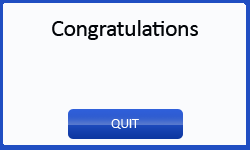
<style>
.page{position:relative;width:250px;height:150px;background:#fafbfd}
.page>*{position:absolute;margin:0}
.t1{font:24px "Calibri";letter-spacing:-0.02em;color:#020509}
</style>
<div class="page">
<p class="t1" style="left:52px;top:20px;width:146px;height:20px">Congratulations</p>
</div>
